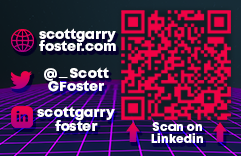
<style>
.page{position:relative;width:241px;height:156px}
.page>*{position:absolute;margin:0}
.t1{font:14px/12px "Mont-HeavyDEMO";color:#ffffff}
.t2{font:14px/13px "Mont-HeavyDEMO";color:#ffffff}
.t3{font:14px "ArialMT";color:#ffffff}
.t4{font:14px/14px "Mont-HeavyDEMO";color:#ffffff}
.t5{font:12px/12px "Mont-HeavyDEMO";color:#ffffff}
</style>
<div class="page">
<p class="t1" style="left:39px;top:28px;width:77px;height:23px;text-align:center">scottgarry<br>foster.com</p>
<p class="t2" style="left:44px;top:67px;width:65px;height:25px;text-align:center">@    Scott<br>GFoster</p>
<p class="t3" style="left:58px;top:77px;width:10px;height:1px">_</p>
<p class="t4" style="left:37px;top:106px;width:78px;height:25px;text-align:center">scottgarry<br>foster</p>
<p class="t5" style="left:151px;top:122px;width:52px;height:21px;text-align:center">Scan on<br>Linkedin</p>
</div>
